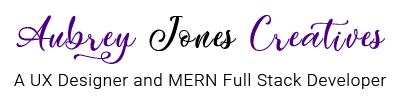
<style>
.page{position:relative;width:400px;height:100px;background:#ffffff}
.page>*{position:absolute;margin:0}
.t1{font:41.7px "Easy-November";letter-spacing:0.05em;color:#4b0082}
.t2{font:41.7px "Easy-November";letter-spacing:0.05em;color:#000000}
.t3{font:16.7px "Roboto-Light";letter-spacing:0.05em;color:#000000}
</style>
<div class="page">
<p class="t1" style="left:16px;top:15px;width:369px;height:49px">Aubrey <span class="t2">Jones </span>Creatives</p>
<p class="t3" style="left:14px;top:73px;width:373px;height:16px">A UX Designer and MERN Full Stack Developer</p>
</div>
